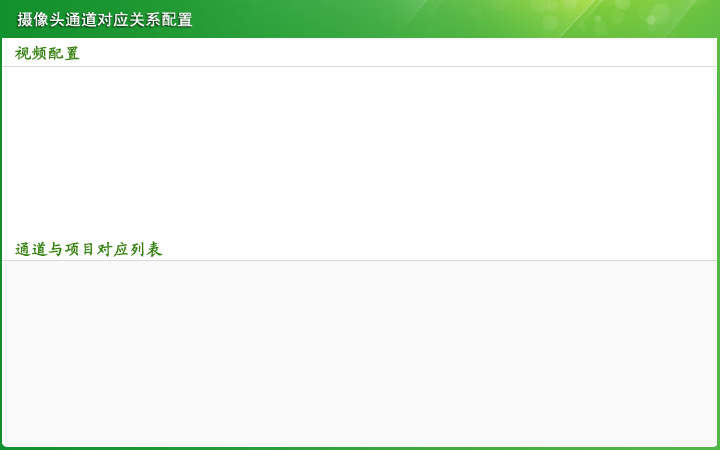
<style>
.page{position:relative;width:720px;height:450px;background:#ffffff}
.page>*{position:absolute;margin:0}
.t1{font:16px "SimHei";color:#ffffff;text-transform:uppercase}
.t2{font:16px "KaiTi_GB2312";color:#33800d;text-transform:uppercase;font-weight:bold}
</style>
<div class="page">
<p class="t1" style="left:17px;top:12px;width:176px;height:15px">摄像头通道对应关系配置</p>
<p class="t2" style="left:14px;top:46px;width:66px;height:15px">视频配置</p>
<p class="t2" style="left:15px;top:241px;width:148px;height:17px">通道与项目对应列表</p>
</div>
